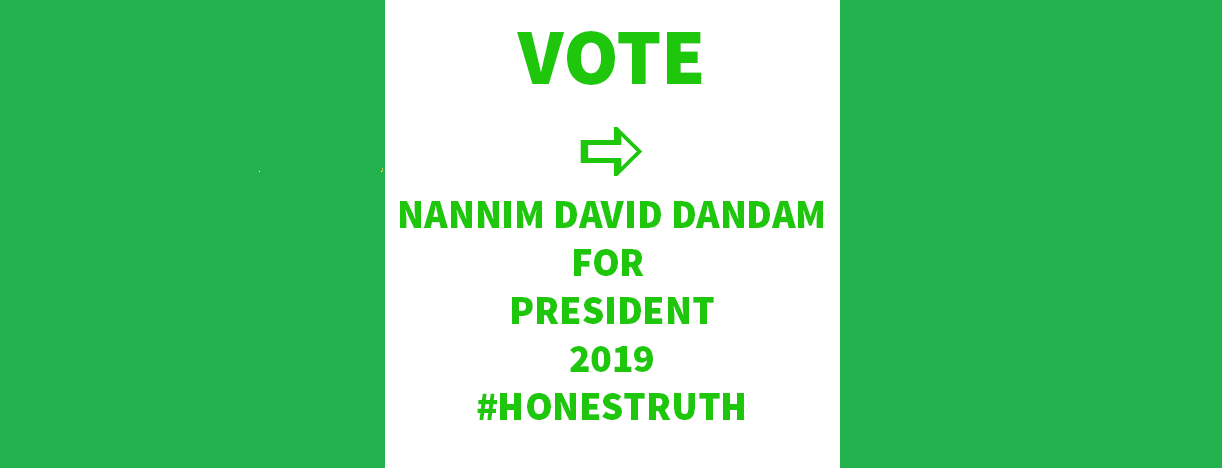
<style>
.page{position:relative;width:1222px;height:468px;background:#22b14c}
.page>*{position:absolute;margin:0}
.t1{font:40px "SourceSansPro-Black";color:#1ec70c}
.t2{font:80px "SourceSansPro-Black";color:#1ec70c}
.t3{font:80px "Wingdings3";color:#1ec70c}
</style>
<div class="page">
<p class="t1" style="left:400px;top:31px;width:423px;height:389px;text-align:center"><span class="t2">VOTE<br></span><span class="t3">a<br></span>NANNIM DAVID DANDAM<br>FOR <br>PRESIDENT<br>2019<br>#HONESTRUTH</p>
</div>
